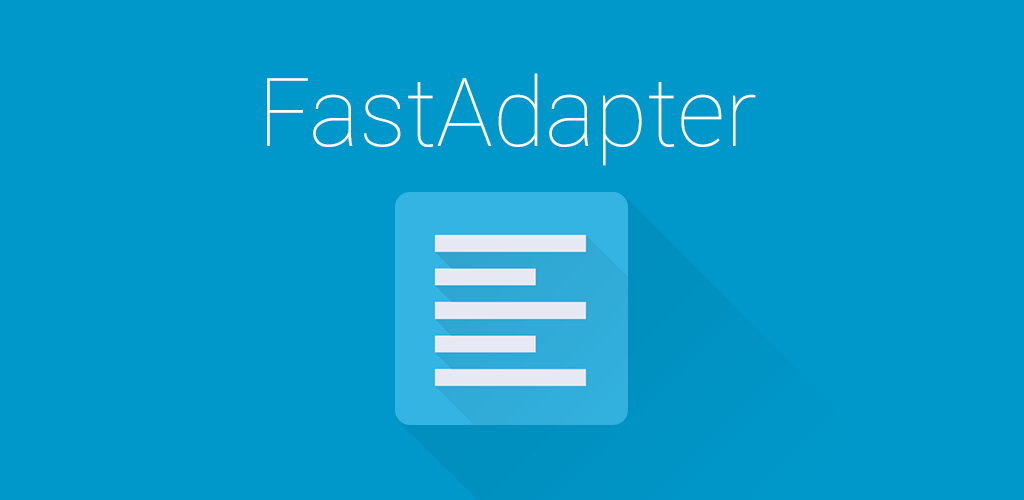
<style>
.page{position:relative;width:1024px;height:500px;background:#0098ca}
.page>*{position:absolute;margin:0}
.t1{font:95.2px "Roboto-Thin";color:#ffffff}
</style>
<div class="page">
<p class="t1" style="left:267px;top:73px;width:489px;height:93px">FastAdapter</p>
</div>
